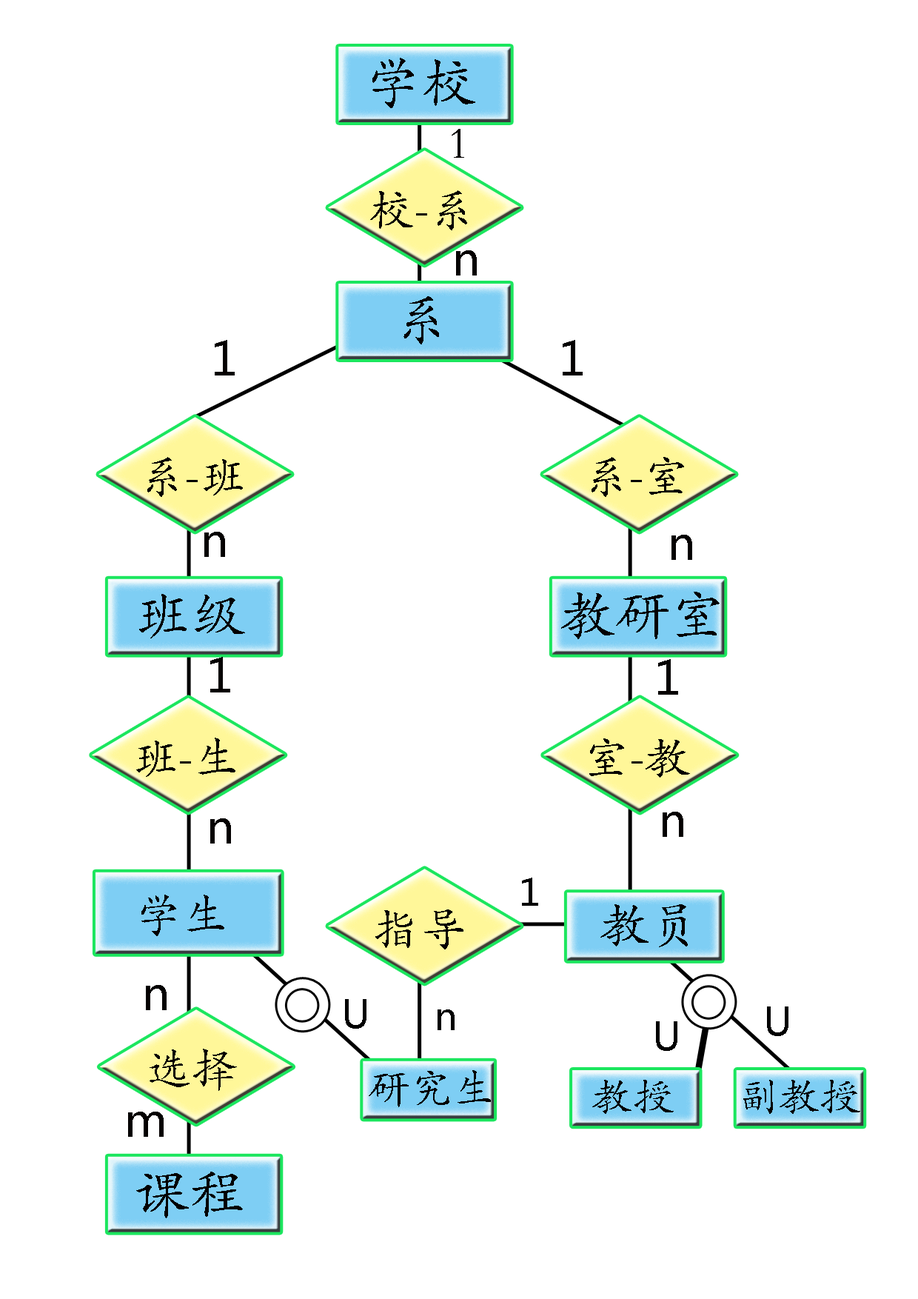
<style>
.page{position:relative;width:918px;height:1299px;background:#ffffff}
.page>*{position:absolute;margin:0}
.t1{font:55.5px "STKaiti";color:#030000}
.t2{font:46.3px "STKaiti";color:#030000}
.t3{font:46.3px "MicrosoftYaHei";color:#030000}
.t4{font:37px "MicrosoftYaHei";color:#000000}
.t5{font:49.9px "STKaiti";color:#030000}
.t6{font:38.5px "MicrosoftYaHei";color:#000000}
.t7{font:42.2px "STKaiti";color:#030000}
.t8{font:41px "STKaiti";color:#030000}
</style>
<div class="page">
<p class="t1" style="left:372px;top:58px;width:103px;height:50px">学校</p>
<p class="t2" style="left:452px;top:129px;width:12px;height:29px">1</p>
<p class="t2" style="left:370px;top:190px;width:97px;height:40px">校-系</p>
<p class="t3" style="left:456px;top:250px;width:21px;height:25px">n</p>
<p class="t1" style="left:404px;top:296px;width:35px;height:48px">系</p>
<p class="t3" style="left:215px;top:340px;width:20px;height:35px">1</p>
<p class="t3" style="left:563px;top:340px;width:20px;height:35px">1</p>
<p class="t2" style="left:147px;top:457px;width:96px;height:40px">系-班</p>
<p class="t2" style="left:592px;top:457px;width:92px;height:40px">系-室</p>
<p class="t3" style="left:204px;top:532px;width:21px;height:25px">n</p>
<p class="t3" style="left:672px;top:535px;width:20px;height:25px">n</p>
<p class="t1" style="left:139px;top:594px;width:106px;height:44px">班级</p>
<p class="t1" style="left:561px;top:592px;width:159px;height:47px">教研室</p>
<p class="t3" style="left:210px;top:657px;width:20px;height:35px">1</p>
<p class="t3" style="left:658px;top:659px;width:20px;height:36px">1</p>
<p class="t2" style="left:136px;top:737px;width:99px;height:40px">班-生</p>
<p class="t2" style="left:589px;top:738px;width:101px;height:39px">室-教</p>
<p class="t3" style="left:210px;top:818px;width:21px;height:25px">n</p>
<p class="t3" style="left:663px;top:812px;width:20px;height:25px">n</p>
<p class="t4" style="left:522px;top:877px;width:16px;height:29px">1</p>
<p class="t2" style="left:141px;top:894px;width:83px;height:42px">学生</p>
<p class="t5" style="left:600px;top:904px;width:88px;height:43px">教员</p>
<p class="t2" style="left:375px;top:909px;width:89px;height:40px">指导</p>
<p class="t3" style="left:146px;top:985px;width:21px;height:25px">n</p>
<p class="t6" style="left:345px;top:999px;width:22px;height:29px">U</p>
<p class="t4" style="left:438px;top:1009px;width:17px;height:21px">n</p>
<p class="t6" style="left:767px;top:1006px;width:22px;height:30px">U</p>
<p class="t6" style="left:656px;top:1021px;width:22px;height:30px">U</p>
<p class="t2" style="left:150px;top:1048px;width:87px;height:43px">选择</p>
<p class="t7" style="left:369px;top:1070px;width:122px;height:37px">研究生</p>
<p class="t8" style="left:592px;top:1080px;width:82px;height:34px">教授</p>
<p class="t8" style="left:743px;top:1080px;width:117px;height:34px">副教授</p>
<p class="t3" style="left:128px;top:1111px;width:36px;height:26px">m</p>
<p class="t1" style="left:136px;top:1171px;width:107px;height:47px">课程</p>
</div>
